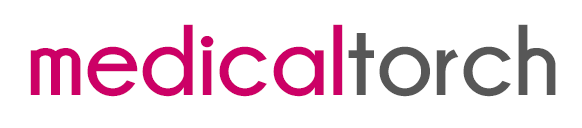
<style>
.page{position:relative;width:582px;height:128px;background:#ffffff}
.page>*{position:absolute;margin:0}
.t1{font:100px "Champagne&Limousines-Bold";color:#cc0066}
.t2{font:100px "Champagne&Limousines-Bold";color:#575757}
</style>
<div class="page">
<p class="t1" style="left:30px;top:24px;width:526px;height:73px">medical<span class="t2">torch</span></p>
</div>
